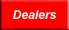
<style>
.page{position:relative;width:69px;height:30px;background:#ff0000}
.page>*{position:absolute;margin:0}
.t1{font:12px "Arial-BoldItalicMT";color:#ffffff}
</style>
<div class="page">
<p class="t1" style="left:13px;top:10px;width:44px;height:9px">Dealers</p>
</div>
